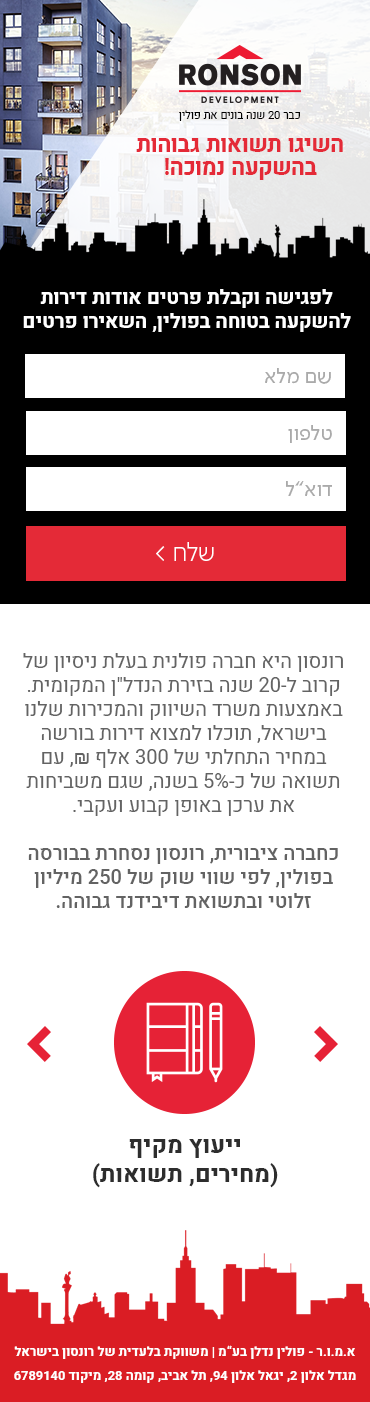
<style>
.page{position:relative;width:370px;height:1402px;background:#ffffff}
.page>*{position:absolute;margin:0}
.t1{font:11.3px "Heebo-Regular";color:#000000}
.t2{font:23.8px/23.1px "Heebo-Bold";color:#e42a37;scale:0.96 1}
.t3{font:20px "Heebo-Bold";color:#ffffff}
.t4{font:20.9px "SimplerPro_V3-Regular";color:#aaaaaa}
.t5{font:26.4px "SimplerPro_V3-Light";color:#ffffff;scale:0.96 1}
.t6{font:20px "Heebo-Regular";color:#636363}
.t7{font:20px "ArialMT";color:#636363}
.t8{font:20px "Heebo-Medium";color:#636363}
.t9{font:24.1px "Heebo-Bold";color:#2d2d2d}
.t10{font:12.8px/24px "Heebo-Bold";color:#ffffff}
</style>
<div class="page">
<p class="t1" style="left:179px;top:110px;width:121px;height:11px">כבר 20 שנה בונים את פולין</p>
<p class="t2" style="left:136px;top:138px;width:207px;height:42px;text-align:center">השיגו תשואות גבוהות<br>בהשקעה נמוכה!</p>
<p class="t3" style="left:23px;top:289px;width:328px;height:43px;text-align:center">לפגישה וקבלת פרטים אודות דירות להשקעה בטוחה בפולין, השאירו פרטים</p>
<p class="t4" style="left:265px;top:368px;width:66px;height:16px">שם מלא</p>
<p class="t4" style="left:288px;top:425px;width:44px;height:18px">טלפון</p>
<p class="t4" style="left:286px;top:481px;width:46px;height:15px">דוא”ל</p>
<p class="t5" style="left:156px;top:542px;width:58px;height:19px">שלח &gt;</p>
<p class="t6" style="left:23px;top:653px;width:320px;height:255px;text-align:center">רונסון היא חברה פולנית בעלת ניסיון של קרוב ל-20 שנה בזירת הנדל"ן המקומית.<br>באמצעות משרד השיווק והמכירות שלנו בישראל, תוכלו למצוא דירות בורשה במחיר התחלתי של 300 אלף <span class="t7">₪</span>, עם תשואה של כ-5% בשנה, שגם משביחות את ערכן באופן קבוע ועקבי. <br><br><span class="t8">כחברה ציבורית, רונסון נסחרת בבורסה בפולין, לפי שווי שוק של 250 מיליון זלוטי ובתשואת דיבידנד גבוהה.</span></p>
<p class="t9" style="left:93px;top:1139px;width:185px;height:49px;text-align:center">ייעוץ מקיף<br>(מחירים, תשואות)</p>
<p class="t10" style="left:14px;top:1345px;width:342px;height:38px;text-align:center">א.מ.ו.ר - פולין נדלן בע”מ | משווקת בלעדית של רונסון בישראל<br>מגדל אלון 2, יגאל אלון 94, תל אביב, קומה 28, מיקוד 6789140</p>
</div>
